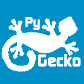
<style>
.page{position:relative;width:84px;height:84px;background:#0090c8}
.page>*{position:absolute;margin:0}
.t1{font:14px "ContinuumBold";color:#fefefe}
.t2{font:17px "ContinuumBold";color:#fefefe}
</style>
<div class="page">
<p class="t1" style="left:25px;top:17px;width:15px;height:13px">Py</p>
<p class="t2" style="left:38px;top:54px;width:43px;height:13px">Gecko</p>
</div>
